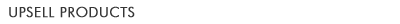
<style>
.page{position:relative;width:400px;height:24px;background:#ffffff}
.page>*{position:absolute;margin:0}
.t1{font:14px "FuturaBT-Light";letter-spacing:0.025em;color:#363636;text-transform:uppercase;font-weight:bold}
</style>
<div class="page">
<p class="t1" style="left:9px;top:6px;width:126px;height:12px">upsell products</p>
</div>
